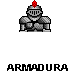
<style>
.page{position:relative;width:75px;height:71px;background:#ffffff}
.page>*{position:absolute;margin:0}
.t1{font:10.3px "Arial-BoldMT";color:#000000;scale:1.11 1}
</style>
<div class="page">
<p class="t1" style="left:7px;top:64px;width:61px;height:7px">ARMADURA</p>
</div>
